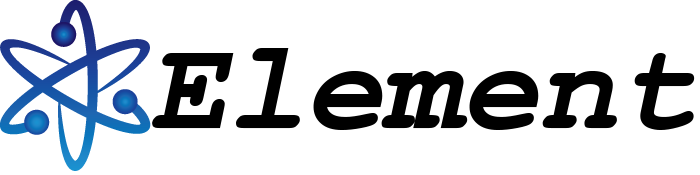
<style>
.page{position:relative;width:700px;height:175px;background:#ffffff}
.page>*{position:absolute;margin:0}
.t1{font:130px "CourierNewPS-BoldItalicMT";color:#000000}
</style>
<div class="page">
<p class="t1" style="left:152px;top:48px;width:543px;height:82px">Element</p>
</div>
